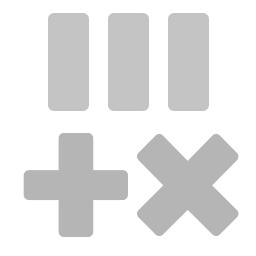
<style>
.page{position:relative;width:256px;height:256px;background:#ffffff}
.page>*{position:absolute;margin:0}
.t1{font:192px "Rubik-Bold";color:#b5b5b5}
</style>
<div class="page">
<p class="t1" style="left:23px;top:133px;width:105px;height:104px">+</p>
<p class="t1" style="left:137px;top:134px;width:102px;height:102px">×</p>
</div>
